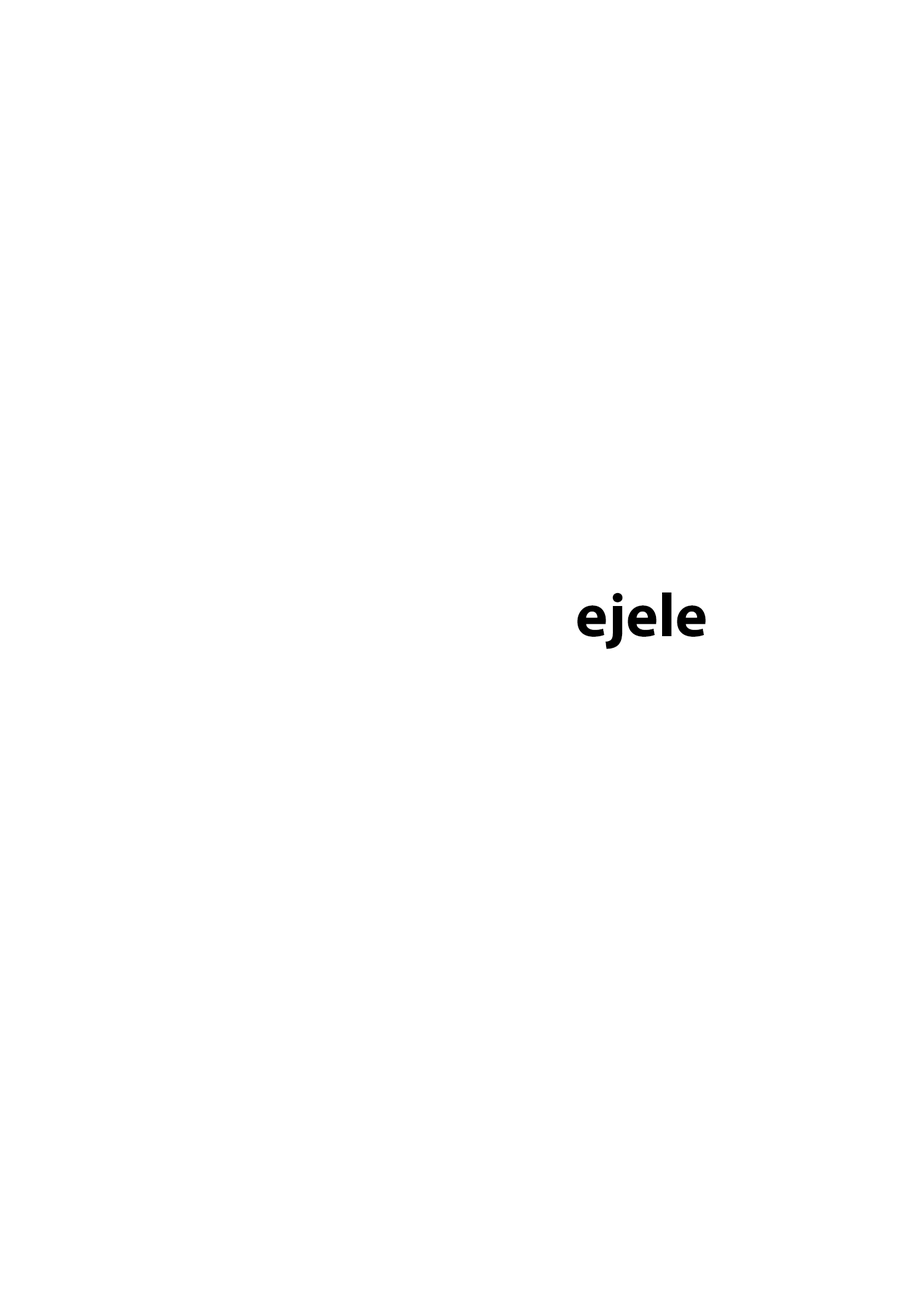
<style>
.page{position:relative;width:923px;height:1292px;background:#ffffff}
.page>*{position:absolute;margin:0}
.t1{font:61.5px "MyriadPro-Bold";color:#000000}
</style>
<div class="page">
<p class="t1" style="left:577px;top:592px;width:129px;height:57px">ejele</p>
</div>
